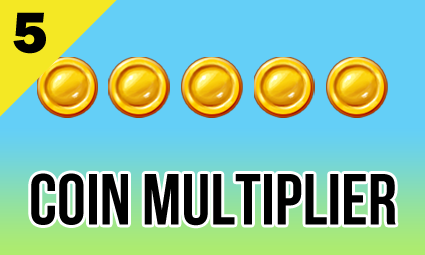
<style>
.page{position:relative;width:425px;height:255px;background:#64cff7}
.page>*{position:absolute;margin:0}
.t1{font:60px "FranklinGothic-Heavy";color:#000000}
.t2{font:72px "BebasNeueBold";color:#000000}
</style>
<div class="page">
<p class="t1" style="left:13px;top:12px;width:33px;height:42px">5</p>
<p class="t2" style="left:31px;top:173px;width:365px;height:53px">COIN MULTIPLIER</p>
</div>
